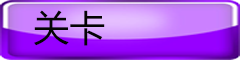
<style>
.page{position:relative;width:240px;height:60px}
.page>*{position:absolute;margin:0}
.t1{font:36px "MicrosoftYaHei";color:#040404}
</style>
<div class="page">
<p class="t1" style="left:34px;top:10px;width:71px;height:36px">关卡</p>
</div>
